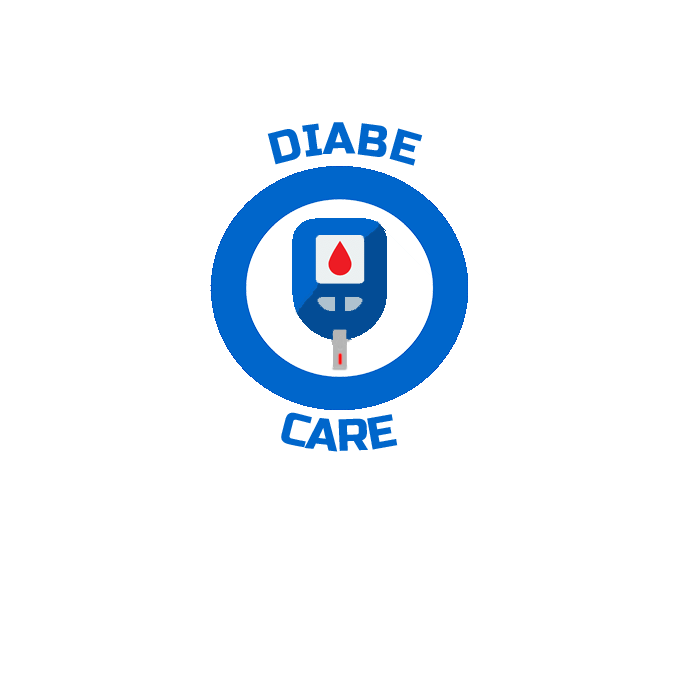
<style>
.page{position:relative;width:700px;height:700px;background:#ffffff}
.page>*{position:absolute;margin:0}
.t1{font:45px "RussoOne-Regular";color:#0066cb}
.t2{font:45px "TimesNewRomanPSMT";color:#5774f2}
</style>
<div class="page">
<p class="t1" style="left:267px;top:122px;width:156px;height:44px"><span class="t2">  </span>DIABE</p>
<p class="t1" style="left:281px;top:412px;width:117px;height:40px">CARE</p>
</div>
